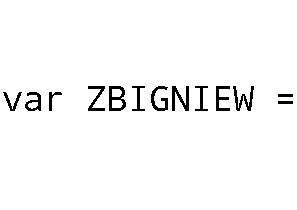
<style>
.page{position:relative;width:297px;height:210px;background:#ffffff}
.page>*{position:absolute;margin:0}
.t1{font:35px "DroidSansMono";color:#000000}
</style>
<div class="page">
<p class="t1" style="left:3px;top:86px;width:290px;height:25px">var ZBIGNIEW =</p>
</div>
